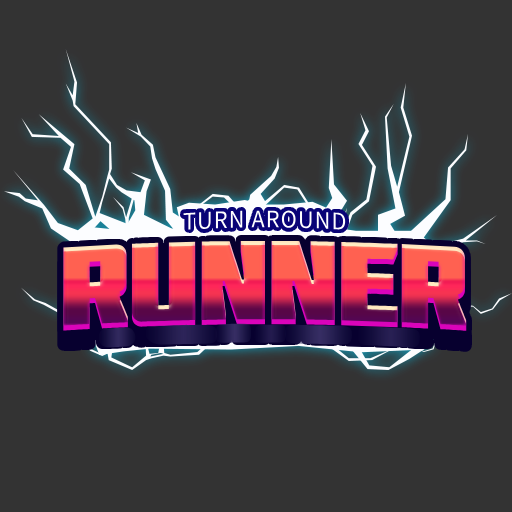
<style>
.page{position:relative;width:512px;height:512px;background:#333333}
.page>*{position:absolute;margin:0}
.t1{font:22.7px "NotoSansKR-Regular";letter-spacing:0.05em;color:#ffffff;scale:0.96 1}
.t2{font:119px "Molot";letter-spacing:-0.025em}
</style>
<div class="page">
<p class="t1" style="left:183px;top:210px;width:163px;height:20px">TURN AROUND</p>
<p class="t2" style="left:63px;top:240px;width:404px;height:91px">runner</p>
</div>
